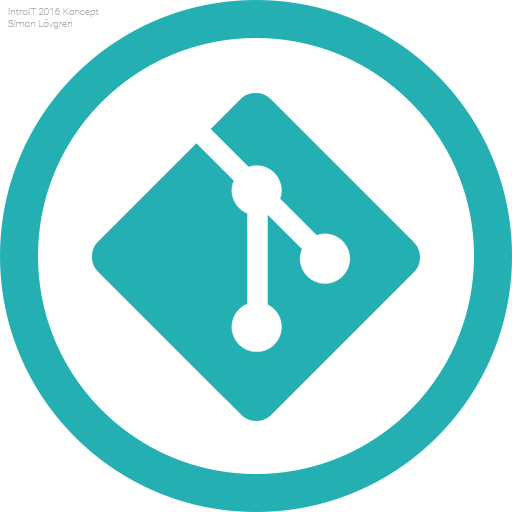
<style>
.page{position:relative;width:512px;height:512px;background:#ffffff}
.page>*{position:absolute;margin:0}
.t1{font:10px "Roboto-Thin";color:#b5b4b4}
</style>
<div class="page">
<p class="t1" style="left:8px;top:8px;width:91px;height:21px">IntroIT 2016 Koncept<br>Simon Lövgren</p>
</div>
